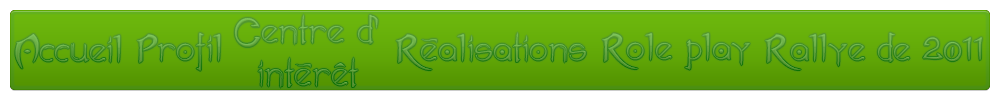
<style>
.page{position:relative;width:1000px;height:100px;background:#ffffff}
.page>*{position:absolute;margin:0}
.t1{font:36px "AKVALEIR";color:#6cae49}
.t2{font:36px "AKVALEIR";color:#6aab46}
.t3{font:36px "AKVALEIR";color:#6dae49}
.t4{font:36px "AKVALEIR";color:#69a946}
.t5{font:36px "AKVALEIR";color:#6bab47}
.t6{font:36px "AKVALEIR";color:#6bac48}
</style>
<div class="page">
<p class="t1" style="left:234px;top:14px;width:144px;height:74px;text-align:center">Centre d’<br>intérêt</p>
<p class="t2" style="left:15px;top:34px;width:106px;height:35px">Accueil</p>
<p class="t3" style="left:137px;top:32px;width:84px;height:39px">Profil</p>
<p class="t4" style="left:396px;top:32px;width:190px;height:39px">Réalisations</p>
<p class="t5" style="left:602px;top:33px;width:148px;height:37px">Role play</p>
<p class="t6" style="left:765px;top:32px;width:217px;height:39px">Rallye de 2011</p>
</div>
